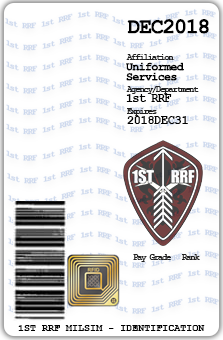
<style>
.page{position:relative;width:223px;height:340px;background:#ffffff}
.page>*{position:absolute;margin:0}
.t1{font:21.6px "CourierNewPS-BoldMT";letter-spacing:-0.06em;color:#000000}
.t2{font:9px "CourierNewPS-BoldMT";letter-spacing:-0.14em;color:#212121}
.t3{font:11.7px/10px "CourierNewPS-BoldMT";letter-spacing:-0.06em;color:#000000}
.t4{font:11.7px "CourierNewPS-BoldMT";letter-spacing:-0.06em;color:#000000}
.t5{font:11.7px "CourierNewPS-BoldMT";letter-spacing:-0.02em;color:#000000}
.t6{font:10px "CourierNewPS-BoldMT";color:#000000}
</style>
<div class="page">
<p class="t1" style="left:127px;top:19px;width:82px;height:15px">DEC2018</p>
<p class="t2" style="left:126px;top:54px;width:48px;height:6px">Affiliation</p>
<p class="t3" style="left:126px;top:62px;width:58px;height:19px">Uniformed<br>Services</p>
<p class="t2" style="left:126px;top:86px;width:73px;height:8px">Agency/Department</p>
<p class="t4" style="left:126px;top:94px;width:46px;height:8px">1st RRF</p>
<p class="t2" style="left:127px;top:108px;width:30px;height:8px">Expires</p>
<p class="t5" style="left:127px;top:116px;width:61px;height:8px">2018DEC31</p>
<p class="t2" style="left:133px;top:254px;width:39px;height:8px">Pay Grade</p>
<p class="t2" style="left:182px;top:254px;width:18px;height:6px">Rank</p>
<p class="t6" style="left:18px;top:325px;width:187px;height:6px">1ST RRF MILSIM - IDENTIFICATION</p>
</div>
